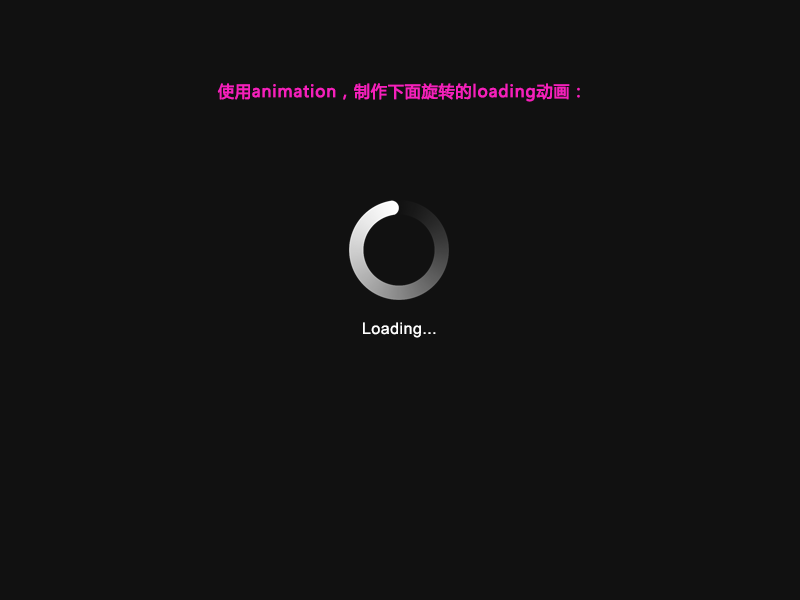
<style>
.page{position:relative;width:800px;height:600px;background:#111111}
.page>*{position:absolute;margin:0}
.t1{font:16px "MicrosoftYaHei";letter-spacing:0.03em;color:#f520bb;font-weight:bold}
.t2{font:16px "ArialMT";letter-spacing:0.03em;color:#ffffff}
</style>
<div class="page">
<p class="t1" style="left:217px;top:83px;width:363px;height:19px">使用animation，制作下面旋转的loading动画：</p>
<p class="t2" style="left:363px;top:322px;width:73px;height:16px">Loading...</p>
</div>
